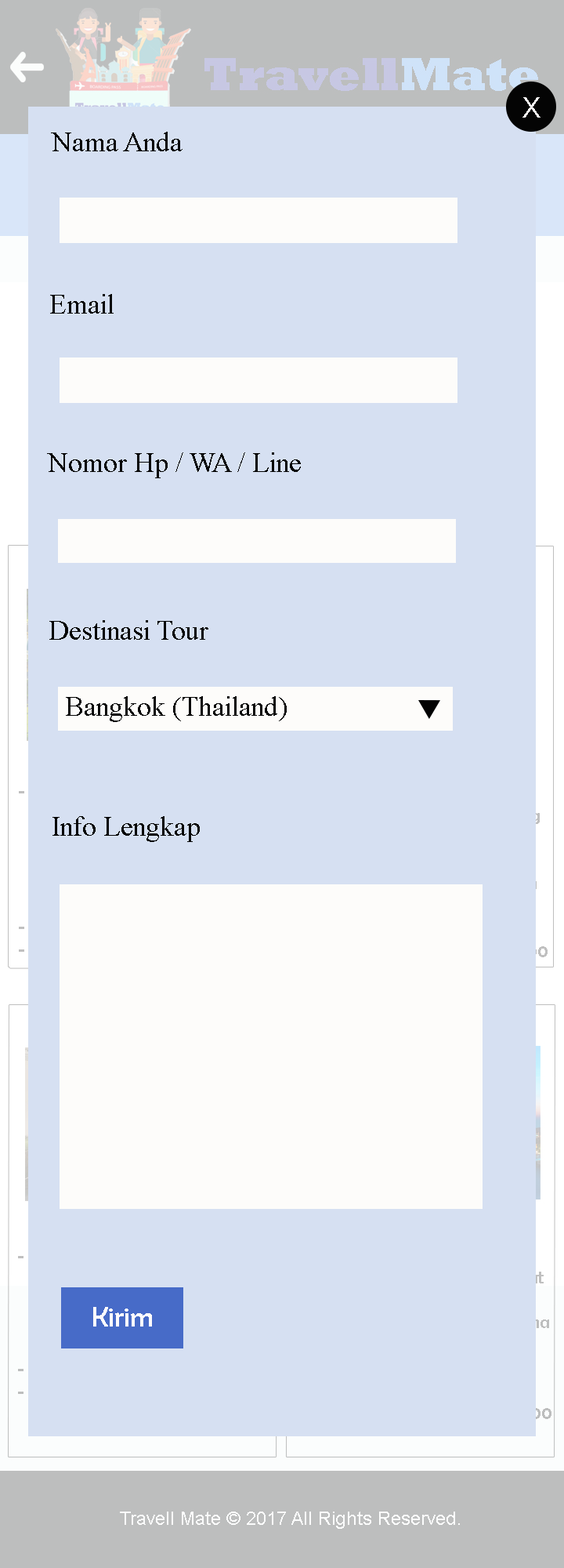
<style>
.page{position:relative;width:564px;height:1568px;background:#d6e0f2}
.page>*{position:absolute;margin:0}
.t1{font:28.2px "ArialMT";color:#fcf9f9}
.t2{font:28.2px "TimesNewRomanPSMT";color:#040404}
.t3{font:28.2px "BerlinSansFB-Reg";color:#fffcfc}
</style>
<div class="page">
<p class="t1" style="left:523px;top:97px;width:18px;height:21px">X</p>
<p class="t2" style="left:51px;top:132px;width:132px;height:19px">Nama Anda</p>
<p class="t2" style="left:50px;top:294px;width:64px;height:20px">Email</p>
<p class="t2" style="left:47px;top:452px;width:254px;height:26px">Nomor Hp / WA / Line</p>
<p class="t2" style="left:49px;top:620px;width:160px;height:20px">Destinasi Tour</p>
<p class="t2" style="left:66px;top:696px;width:221px;height:26px">Bangkok (Thailand)</p>
<p class="t2" style="left:53px;top:816px;width:147px;height:26px">Info Lengkap</p>
<p class="t3" style="left:93px;top:1307px;width:59px;height:20px">Kirim</p>
</div>
